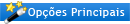
<style>
.page{position:relative;width:130px;height:24px;background:#ffffff}
.page>*{position:absolute;margin:0}
.t1{font:11px "TrebuchetMS";letter-spacing:0.06em;color:#ffffff}
</style>
<div class="page">
<p class="t1" style="left:28px;top:7px;width:97px;height:12px">Opções Principais</p>
</div>
